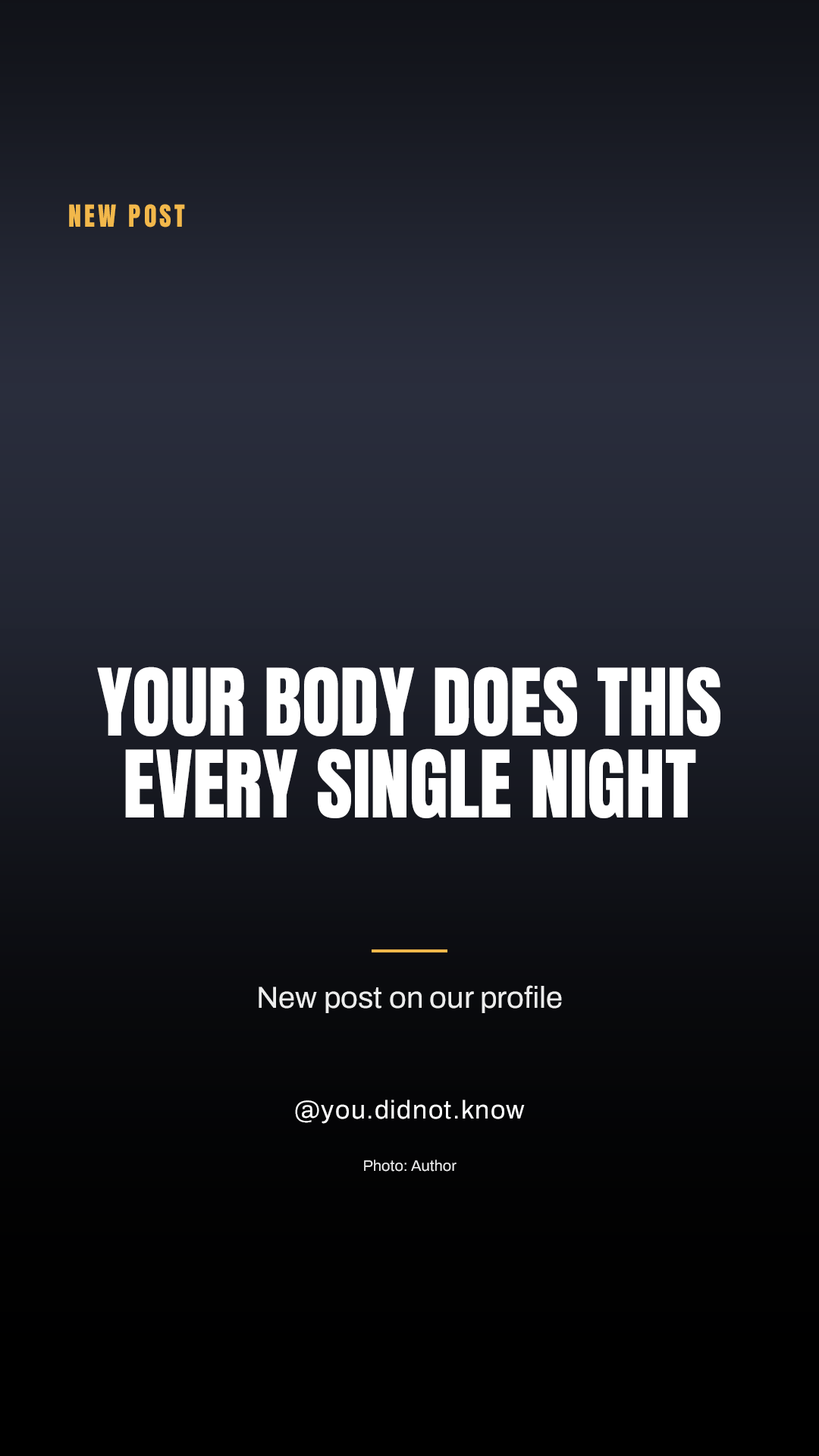
<style>
.page{position:relative;width:819px;height:1456px}
.page>*{position:absolute;margin:0}
.t1{font:25.8px "Anton-Regular";letter-spacing:0.12em;color:#f2b84b}
.t2{font:78.9px/81.9px "Anton-Regular";color:#ffffff}
.t3{font:30.3px "Archivo-Regular";color:#ededed}
.t4{font:25.8px "Archivo-Regular";letter-spacing:0.04em;color:#ffffff}
.t5{font:15.2px "Archivo-Regular";color:#ededed}
</style>
<div class="page">
<p class="t1" style="left:69px;top:204px;width:116px;height:23px">NEW POST</p>
<p class="t2" style="left:97px;top:667px;width:623px;height:151px;text-align:center">YOUR BODY DOES THIS EVERY SINGLE NIGHT</p>
<p class="t3" style="left:259px;top:985px;width:303px;height:28px">New post on our profile</p>
<p class="t4" style="left:295px;top:1100px;width:230px;height:24px">@you.didnot.know</p>
<p class="t5" style="left:364px;top:1159px;width:93px;height:13px">Photo: Author</p>
</div>
